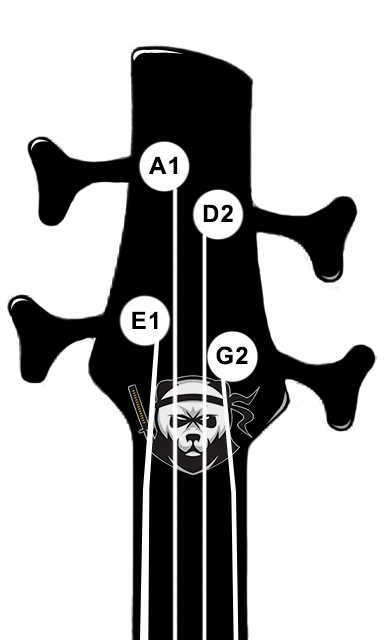
<style>
.page{position:relative;width:386px;height:640px;background:#ffffff}
.page>*{position:absolute;margin:0}
.t1{font:24px "Arial-BoldMT";letter-spacing:0.05em;color:#000000}
</style>
<div class="page">
<p class="t1" style="left:149px;top:156px;width:29px;height:18px">A1</p>
<p class="t1" style="left:203px;top:204px;width:30px;height:18px">D2</p>
<p class="t1" style="left:132px;top:311px;width:26px;height:18px">E1</p>
<p class="t1" style="left:216px;top:346px;width:32px;height:19px">G2</p>
</div>
